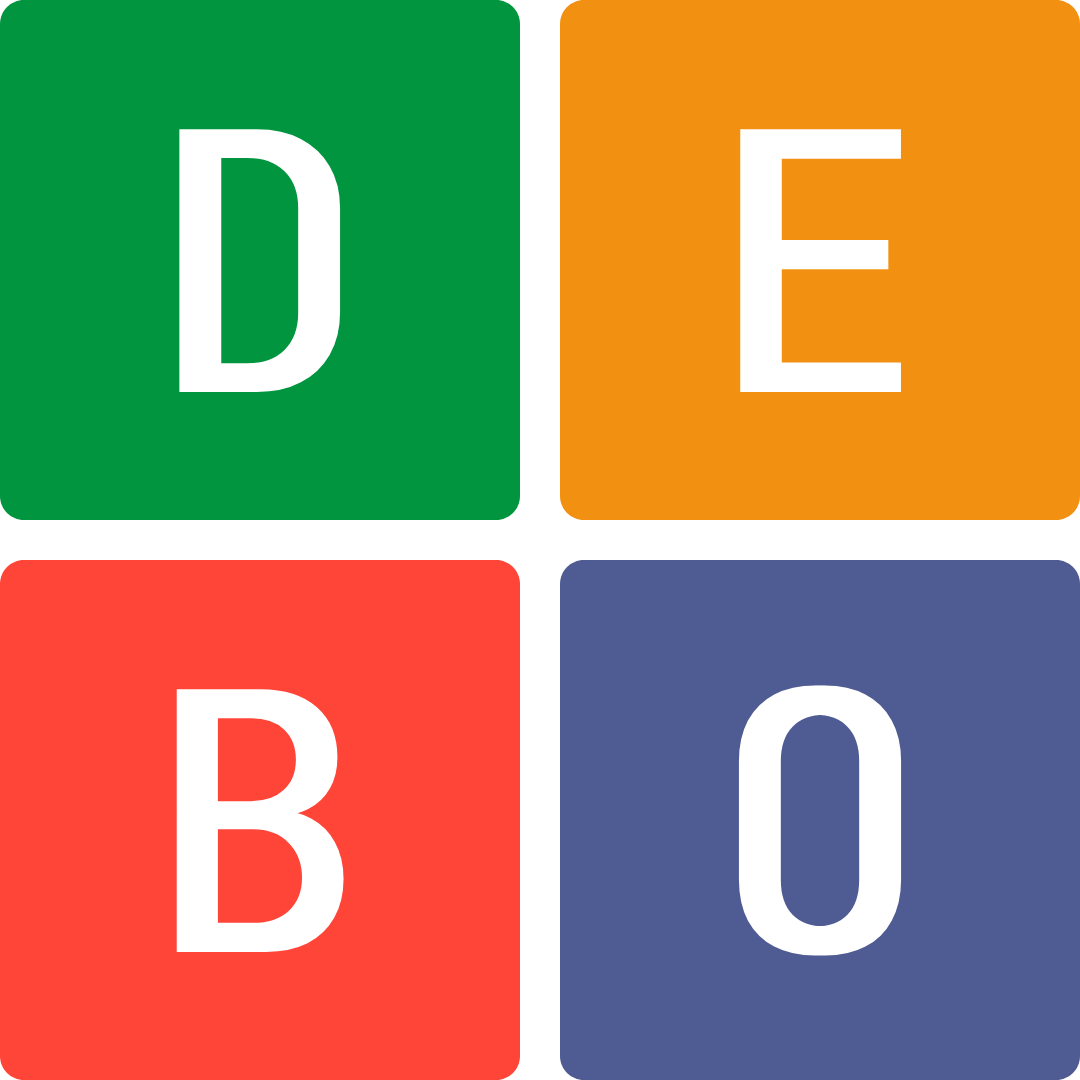
<style>
.page{position:relative;width:1080px;height:1080px;background:#f29111}
.page>*{position:absolute;margin:0}
.t1{font:360px "JetBrainsMonoRoman-Regular";color:#ffffff;font-weight:bold}
</style>
<div class="page">
<p class="t1" style="left:179px;top:129px;width:162px;height:263px">D</p>
<p class="t1" style="left:740px;top:129px;width:161px;height:263px">E</p>
<p class="t1" style="left:176px;top:689px;width:168px;height:263px">B</p>
<p class="t1" style="left:738px;top:685px;width:164px;height:271px">O</p>
</div>
